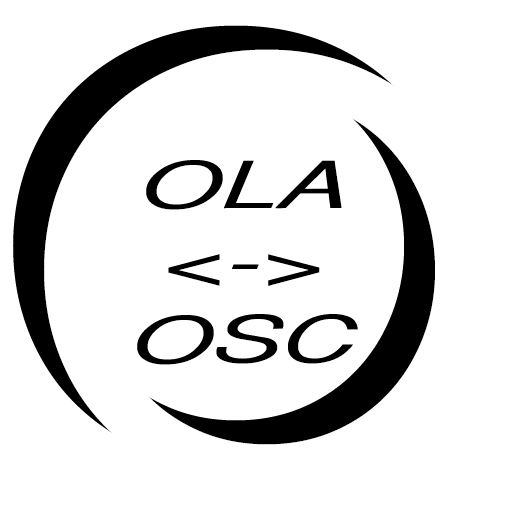
<style>
.page{position:relative;width:512px;height:512px;background:#ffffff}
.page>*{position:absolute;margin:0}
.t1{font:592.4px "Avenir-Roman"}
.t2{font:64.3px "HelveticaCYOblique";color:#000000;scale:1.98 1}
</style>
<div class="page">
<p class="t1" style="left:13px;top:25px;width:446px;height:442px">O</p>
<p class="t2" style="left:137px;top:160px;width:221px;height:205px;text-align:center">OLA<br>&lt;-&gt;<br>OSC</p>
</div>
